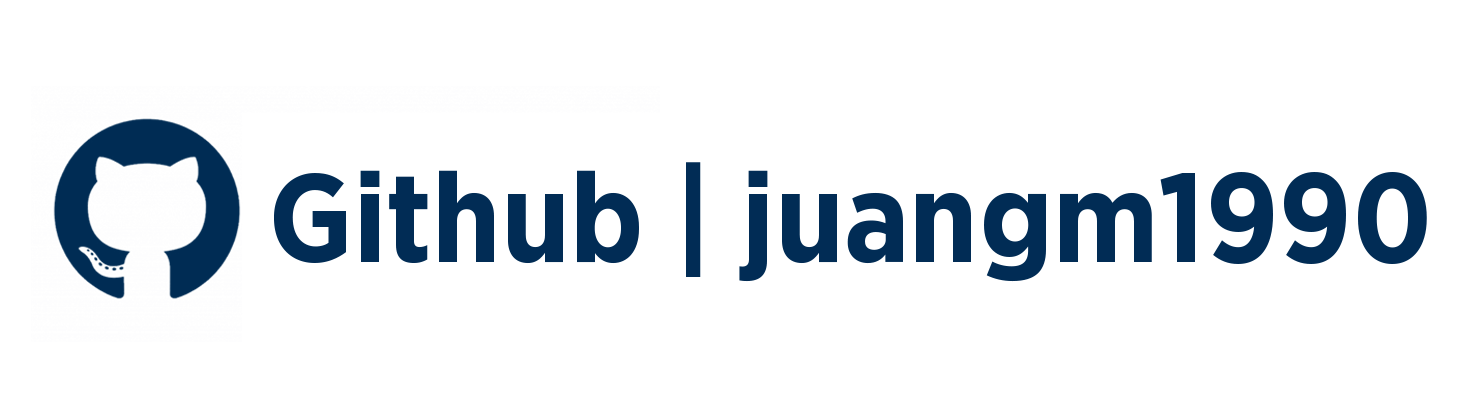
<style>
.page{position:relative;width:1475px;height:417px;background:#ffffff}
.page>*{position:absolute;margin:0}
.t1{font:126.3px "GothamNarrow-Bold";color:#012c55}
</style>
<div class="page">
<p class="t1" style="left:274px;top:162px;width:1153px;height:120px">Github | juangm1990</p>
</div>
